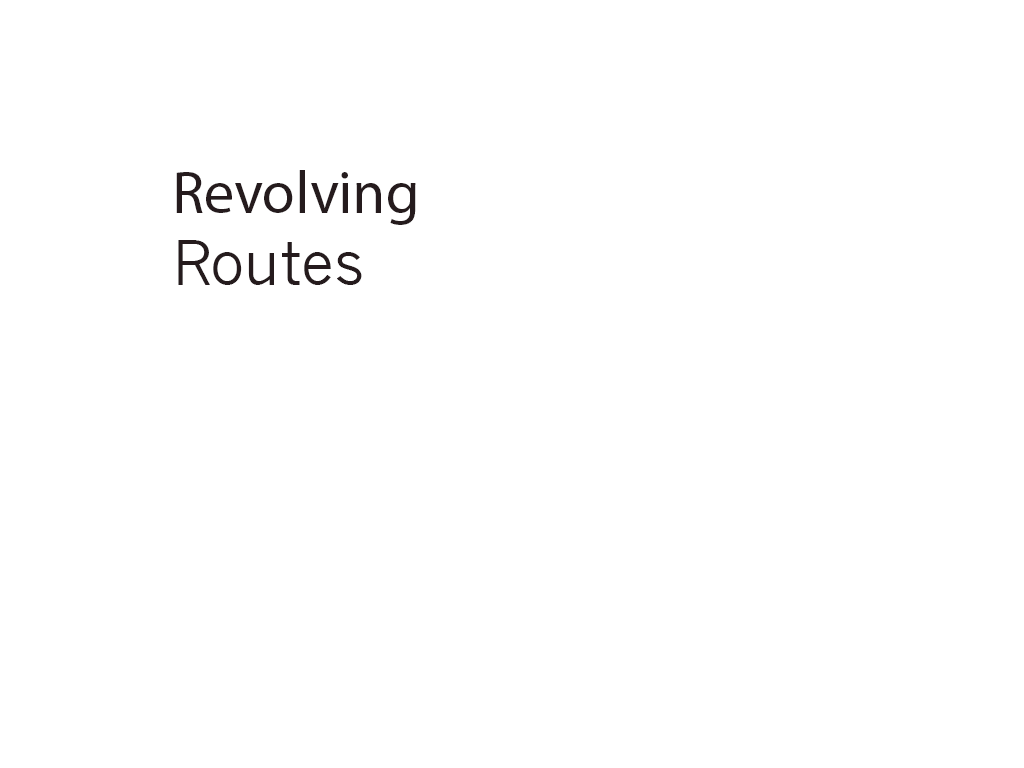
<style>
.page{position:relative;width:1024px;height:768px;background:#ffffff}
.page>*{position:absolute;margin:0}
.t1{font:60px "MyriadPro-Regular";color:#251b1d}
.t2{font:60px "NewsGothicMT";color:#251b1d}
</style>
<div class="page">
<p class="t1" style="left:176px;top:170px;width:240px;height:115px">Revolving<br><span class="t2">Routes</span></p>
</div>
